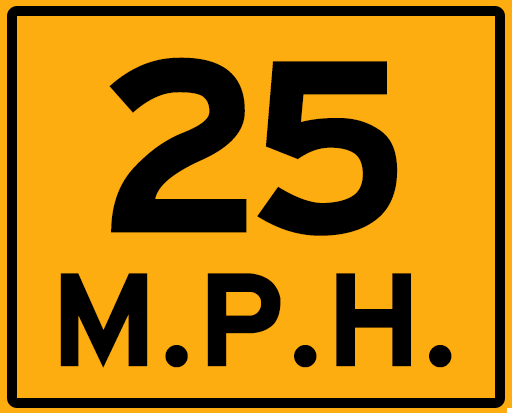
<style>
.page{position:relative;width:512px;height:413px;background:#fead10}
.page>*{position:absolute;margin:0}
.t1{font:259px "HittheRoad";color:#000000}
.t2{font:140.5px "HittheRoad";color:#000000}
</style>
<div class="page">
<p class="t1" style="left:109px;top:57px;width:289px;height:179px">25</p>
<p class="t2" style="left:60px;top:273px;width:392px;height:95px">M.P.H.</p>
</div>
